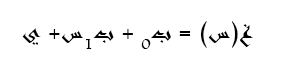
<style>
.page{position:relative;width:298px;height:57px;background:#ffffff}
.page>*{position:absolute;margin:0}
.t1{font:21.1px "Andalus";color:#000000}
</style>
<div class="page">
<p class="t1" style="left:22px;top:21px;width:231px;height:28px">غ(س) = ب0 + ب1س+ ي</p>
</div>
